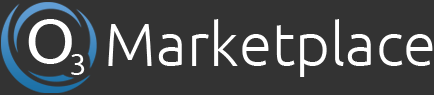
<style>
.page{position:relative;width:434px;height:95px;background:#333333}
.page>*{position:absolute;margin:0}
.t1{font:64.6px "Ubuntu";color:#ffffff;text-transform:uppercase}
.t2{font:60px "Ubuntu-Light";color:#ffffff}
.t3{font:51.7px "Ubuntu";color:#ffffff;text-transform:uppercase}
</style>
<div class="page">
<p class="t1" style="left:28px;top:19px;width:44px;height:45px">O</p>
<p class="t2" style="left:108px;top:19px;width:325px;height:58px">Marketplace</p>
<p class="t3" style="left:71px;top:54px;width:14px;height:21px">3</p>
</div>
